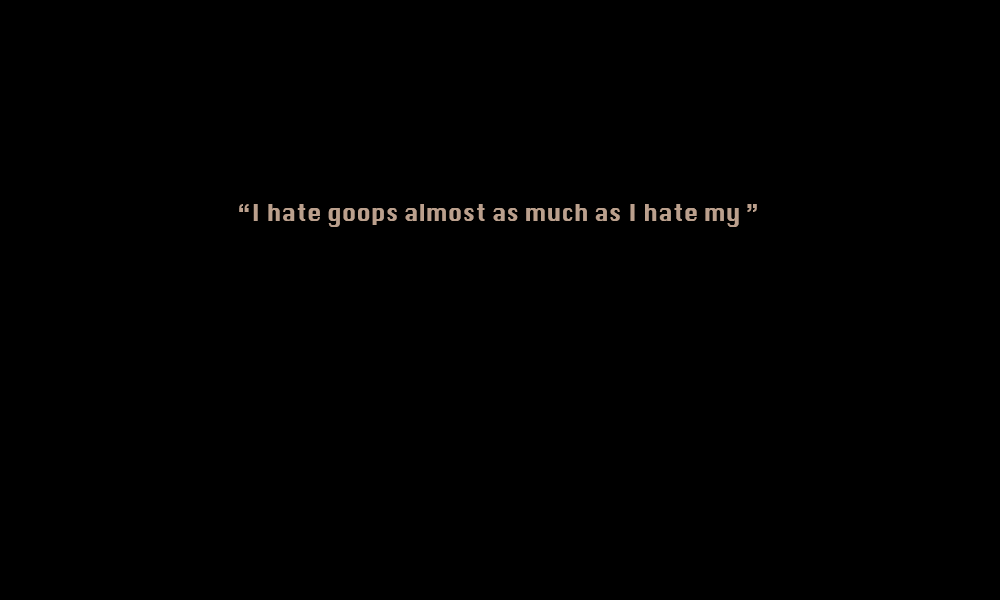
<style>
.page{position:relative;width:1000px;height:600px;background:#000000}
.page>*{position:absolute;margin:0}
.t1{font:22px "Krungthep";color:#bba08d}
.t2{font:34px "Krungthep";color:#ffffff}
</style>
<div class="page">
<p class="t1" style="left:239px;top:204px;width:518px;height:23px"><span class="t2"><br></span>“I hate goops almost as much as I hate my ”</p>
</div>
